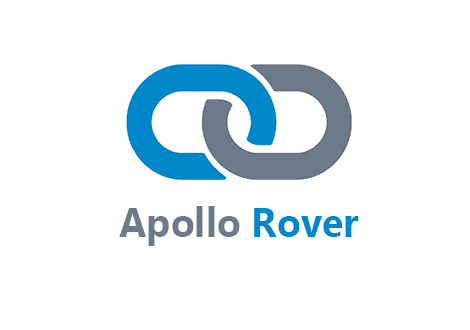
<style>
.page{position:relative;width:470px;height:330px;background:#ffffff}
.page>*{position:absolute;margin:0}
.t1{font:40.6px "MicrosoftNewTaiLue-Bold";color:#6d7a8a;scale:0.96 1}
.t2{font:40.6px "MicrosoftNewTaiLue-Bold";color:#0188ca;scale:0.96 1}
</style>
<div class="page">
<p class="t1" style="left:119px;top:206px;width:240px;height:40px">Apollo <span class="t2">Rover</span></p>
</div>
